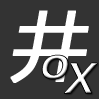
<style>
.page{position:relative;width:99px;height:99px;background:#333333}
.page>*{position:absolute;margin:0}
.t1{font:74.2px "MicrosoftYaHei";color:#ffffff;font-weight:bold;font-style:italic}
.t2{font:41.2px "MicrosoftYaHei";font-weight:bold;font-style:italic}
.t3{font:39.2px "MicrosoftYaHei";color:#ffffff;font-weight:bold;font-style:italic;scale:1.05 1}
</style>
<div class="page">
<p class="t1" style="left:10px;top:10px;width:79px;height:73px">井</p>
<p class="t2" style="left:42px;top:55px;width:27px;height:24px">ｏ</p>
<p class="t3" style="left:64px;top:63px;width:34px;height:31px">Ｘ</p>
</div>
